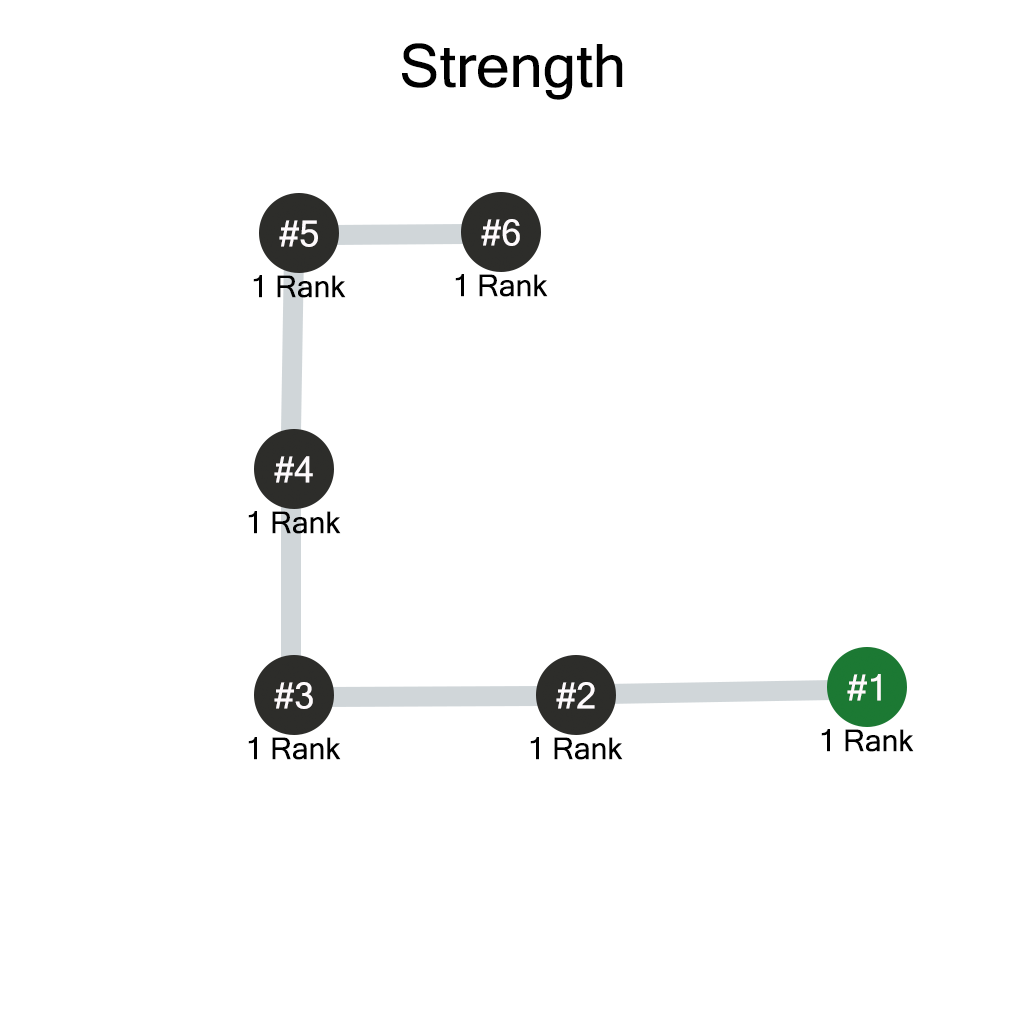
<style>
.page{position:relative;width:1024px;height:1024px;background:#ffffff}
.page>*{position:absolute;margin:0}
.t1{font:60px "MicrosoftSansSerif";color:#000000}
.t2{font:36px "MicrosoftSansSerif";color:#fefafc}
.t3{font:30px "MicrosoftSansSerif";color:#000000}
</style>
<div class="page">
<p class="t1" style="left:402px;top:43px;width:221px;height:57px">Strength</p>
<p class="t2" style="left:279px;top:220px;width:39px;height:27px">#5</p>
<p class="t2" style="left:481px;top:219px;width:39px;height:27px">#6</p>
<p class="t3" style="left:253px;top:275px;width:93px;height:23px">1 Rank</p>
<p class="t3" style="left:455px;top:274px;width:93px;height:23px">1 Rank</p>
<p class="t2" style="left:274px;top:456px;width:39px;height:27px">#4</p>
<p class="t3" style="left:248px;top:511px;width:93px;height:23px">1 Rank</p>
<p class="t2" style="left:847px;top:674px;width:34px;height:27px">#1</p>
<p class="t2" style="left:274px;top:682px;width:39px;height:27px">#3</p>
<p class="t2" style="left:556px;top:682px;width:39px;height:27px">#2</p>
<p class="t3" style="left:248px;top:737px;width:93px;height:23px">1 Rank</p>
<p class="t3" style="left:530px;top:737px;width:93px;height:23px">1 Rank</p>
<p class="t3" style="left:821px;top:729px;width:93px;height:23px">1 Rank</p>
</div>
